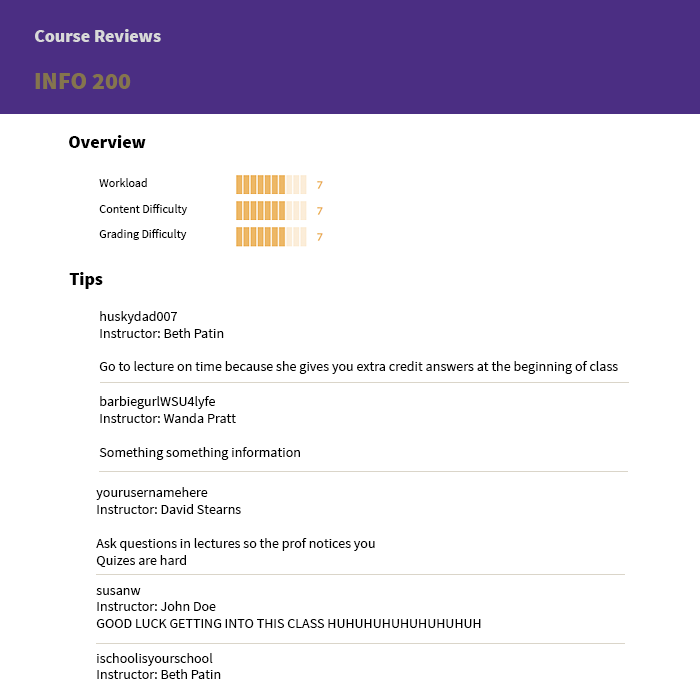
<style>
.page{position:relative;width:700px;height:700px;background:#ffffff}
.page>*{position:absolute;margin:0}
.t1{font:18px "SourceSansPro-Black";color:#d9d9d9}
.t2{font:24px "SourceSansPro-Black";color:#85754d}
.t3{font:18px "SourceSansPro-Black";color:#000000}
.t4{font:12px "SourceSansPro-Regular";color:#000000}
.t5{font:14px "SourceSansPro-Regular";color:#000000}
</style>
<div class="page">
<p class="t1" style="left:35px;top:29px;width:126px;height:13px">Course Reviews</p>
<p class="t2" style="left:35px;top:73px;width:96px;height:16px">INFO 200</p>
<p class="t3" style="left:69px;top:135px;width:77px;height:13px">Overview</p>
<p class="t4" style="left:99px;top:178px;width:48px;height:9px">Workload</p>
<p class="t4" style="left:99px;top:204px;width:89px;height:11px">Content Difficulty</p>
<p class="t4" style="left:99px;top:229px;width:88px;height:11px">Grading Difficulty</p>
<p class="t3" style="left:69px;top:272px;width:34px;height:17px">Tips</p>
<p class="t5" style="left:99px;top:311px;width:519px;height:63px">huskydad007<br>Instructor: Beth Patin<br><br>Go to lecture on time because she gives you extra credit answers at the beginning of class</p>
<p class="t5" style="left:99px;top:396px;width:201px;height:64px">barbiegurlWSU4lyfe<br>Instructor: Wanda Pratt<br><br>Something something information</p>
<p class="t5" style="left:96px;top:487px;width:279px;height:80px">yourusernamehere<br>Instructor: David Stearns<br><br>Ask questions in lectures so the prof notices you<br>Quizes are hard</p>
<p class="t5" style="left:96px;top:588px;width:385px;height:40px">susanw<br>Instructor: John Doe<br>GOOD LUCK GETTING INTO THIS CLASS HUHUHUHUHUHUHUHUH</p>
</div>
